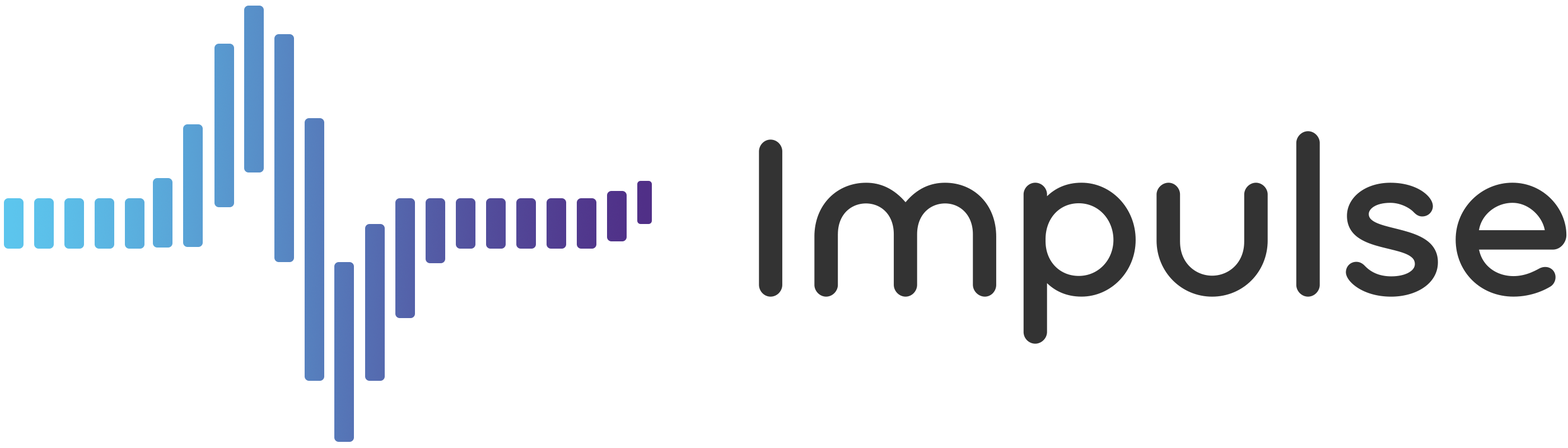
<style>
.page{position:relative;width:1568px;height:448px;background:#ffffff}
.page>*{position:absolute;margin:0}
.t1{font:213.2px "UltimaPro";letter-spacing:-0.02em;color:#333333;font-weight:bold}
</style>
<div class="page">
<p class="t1" style="left:759px;top:131px;width:808px;height:213px">Impulse</p>
</div>
